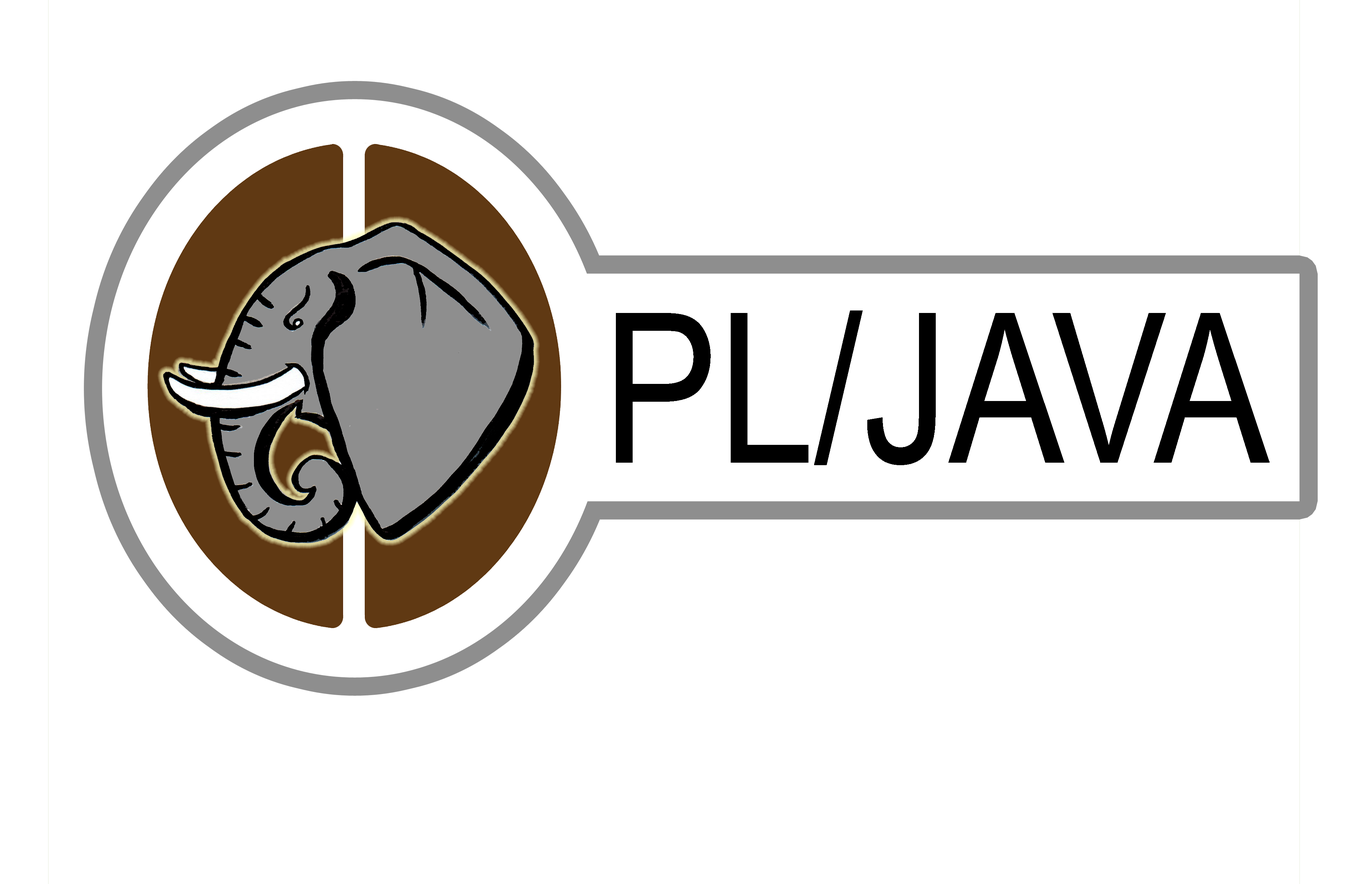
<style>
.page{position:relative;width:1348px;height:884px;background:#ffffff}
.page>*{position:absolute;margin:0}
.t1{font:208.5px "ArialMT";color:#000000;scale:0.83 1}
</style>
<div class="page">
<p class="t1" style="left:616px;top:311px;width:654px;height:154px">PL/JAVA</p>
</div>
